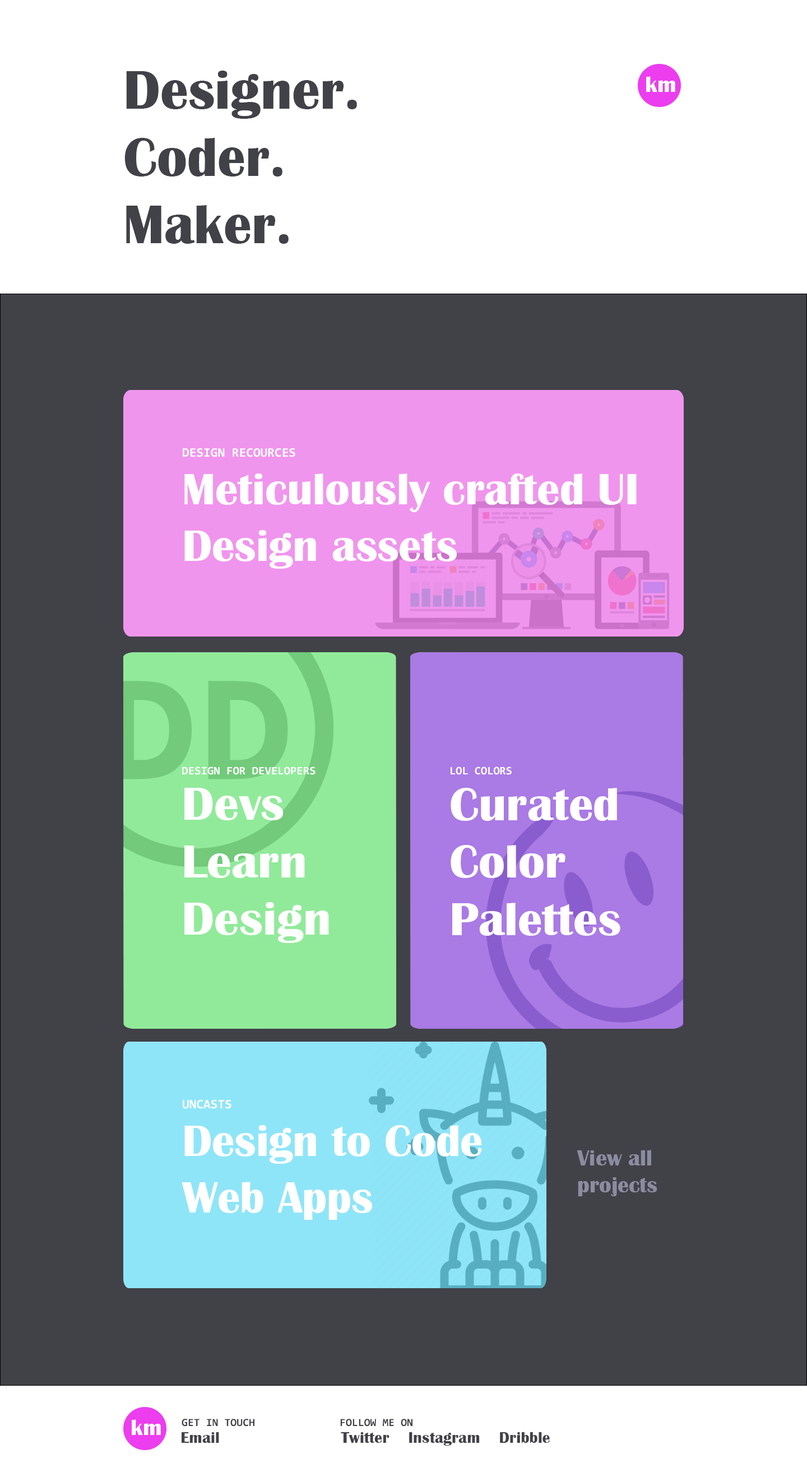
<style>
.page{position:relative;width:807px;height:1477px;background:#414148}
.page>*{position:absolute;margin:0}
.t1{font:56px "BritannicBold";color:#414148}
.t2{font:22.8px "BritannicBold";color:#ffffff}
.t3{font:13.1px "Consolas-Bold";color:#ffffff;text-transform:uppercase}
.t4{font:45.2px/56.4px "BritannicBold";color:#ffffff}
.t5{font:11.5px "Consolas-Bold";color:#ffffff;text-transform:uppercase}
.t6{font:47.8px/57.4px "BritannicBold";color:#ffffff;scale:1.04 1}
.t7{font:47.9px/57.5px "BritannicBold";color:#ffffff}
.t8{font:22.3px "BritannicBold";color:#8c8ca1}
.t9{font:11.1px "Consolas-Bold";color:#414148;text-transform:uppercase}
.t10{font:15.9px "BritannicBold";color:#414148}
</style>
<div class="page">
<p class="t1" style="left:124px;top:71px;width:233px;height:173px">Designer.<br>Coder.<br>Maker.</p>
<p class="t2" style="left:646px;top:76px;width:29px;height:16px">km</p>
<p class="t3" style="left:183px;top:448px;width:112px;height:9px">Design recources</p>
<p class="t4" style="left:184px;top:474px;width:453px;height:95px">Meticulously crafted UI <br>Design assets</p>
<p class="t5" style="left:182px;top:767px;width:134px;height:8px">Design for developers</p>
<p class="t5" style="left:451px;top:767px;width:61px;height:8px">LOl colors</p>
<p class="t6" style="left:184px;top:788px;width:145px;height:155px">Devs <br>Learn<br>Design</p>
<p class="t7" style="left:451px;top:788px;width:169px;height:148px">Curated<br>Color<br>Palettes</p>
<p class="t3" style="left:183px;top:1100px;width:48px;height:9px">Uncasts</p>
<p class="t4" style="left:182px;top:1125px;width:300px;height:95px">Design to Code<br>Web Apps</p>
<p class="t8" style="left:577px;top:1150px;width:80px;height:47px">View all <br>projects</p>
<p class="t2" style="left:132px;top:1420px;width:29px;height:15px">km</p>
<p class="t9" style="left:182px;top:1419px;width:72px;height:8px">Get in touch</p>
<p class="t9" style="left:340px;top:1419px;width:73px;height:8px">follow me on</p>
<p class="t10" style="left:182px;top:1432px;width:37px;height:11px">Email</p>
<p class="t10" style="left:341px;top:1432px;width:209px;height:14px">Twitter    Instagram    Dribble</p>
</div>
